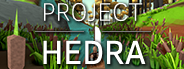
<style>
.page{position:relative;width:184px;height:69px}
.page>*{position:absolute;margin:0}
.t1{font:25.6px "ClearSans-Thin";color:#ffffff}
.t2{font:34.1px "ClearSans";color:#ffffff}
</style>
<div class="page">
<p class="t1" style="left:44px;top:3px;width:99px;height:19px">PROJECT</p>
<p class="t2" style="left:43px;top:40px;width:103px;height:24px">HEDRA</p>
</div>
